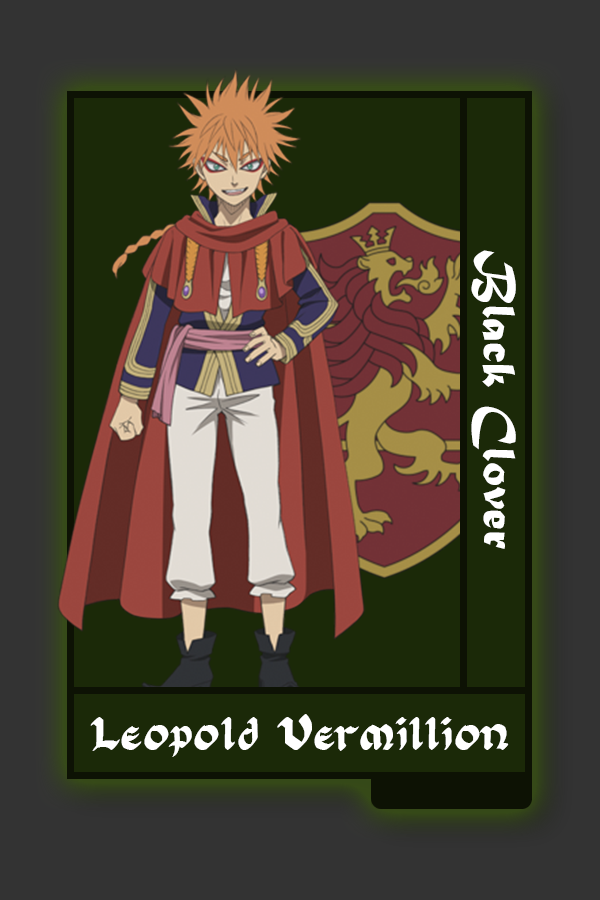
<style>
.page{position:relative;width:600px;height:900px;background:#1b2908}
.page>*{position:absolute;margin:0}
.t1{font:48.8px "MaturaMTScriptCapitals";color:#ffffff}
.t2{font:40px "FloranteatLaura";color:#ffffff}
</style>
<div class="page">
<p class="t1" style="left:471px;top:250px;width:45px;height:299px;rotate:90deg">Black Clover</p>
<p class="t2" style="left:90px;top:714px;width:419px;height:43px">Leopold Vermillion</p>
</div>
